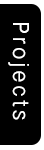
<style>
.page{position:relative;width:44px;height:150px;background:#000000}
.page>*{position:absolute;margin:0}
.t1{font:24px "InaiMathi";letter-spacing:0.14em;color:#ffffff}
</style>
<div class="page">
<p class="t1" style="left:8px;top:23px;width:21px;height:97px;rotate:90deg">Projects</p>
</div>
